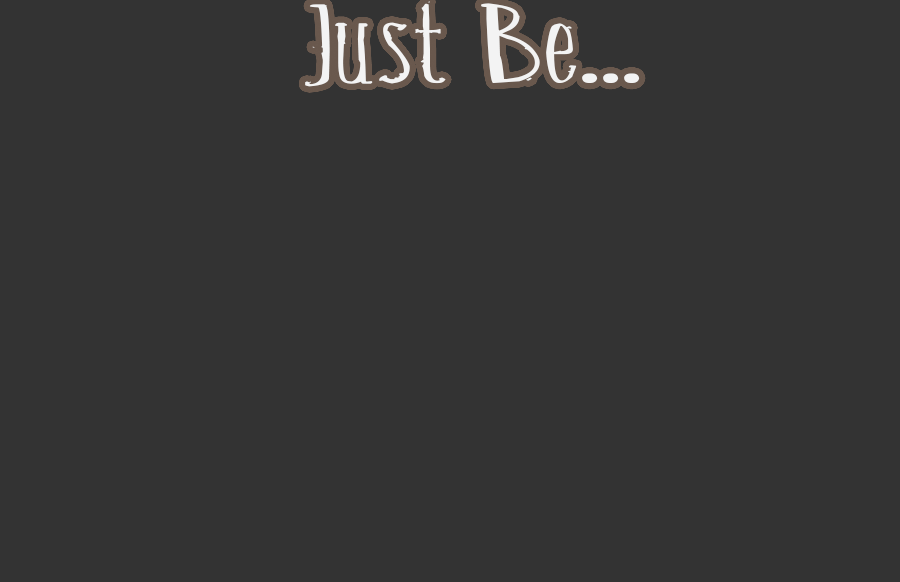
<style>
.page{position:relative;width:900px;height:582px;background:#333333}
.page>*{position:absolute;margin:0}
.t1{font:87.4px "Belisaplumillamanual";color:#f3f3f3;scale:1.86 1}
</style>
<div class="page">
<p class="t1" style="left:305px;top:1px;width:335px;height:86px">Just Be...</p>
</div>
